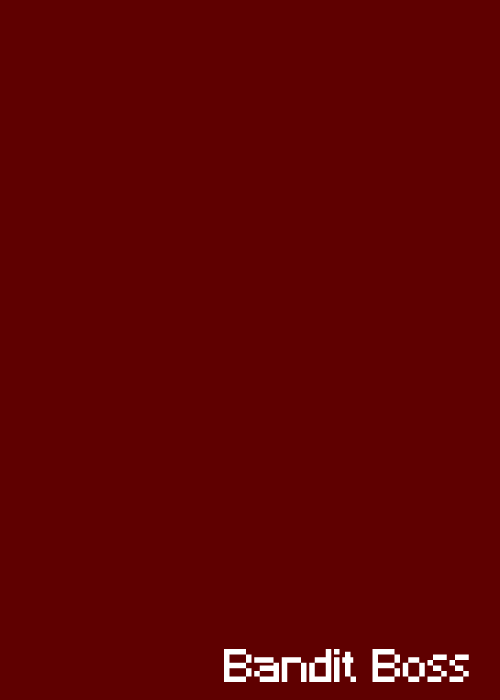
<style>
.page{position:relative;width:500px;height:700px;background:#5f0000}
.page>*{position:absolute;margin:0}
.t1{font:44px "Minecraft";color:#ffffff}
</style>
<div class="page">
<p class="t1" style="left:224px;top:649px;width:245px;height:33px">Bandit Boss</p>
</div>
